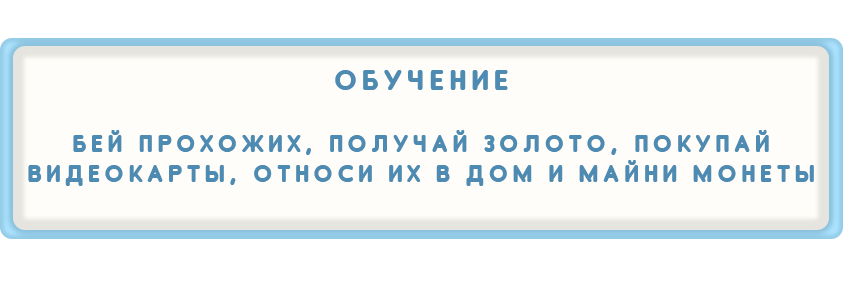
<style>
.page{position:relative;width:843px;height:307px;background:#fffdf9}
.page>*{position:absolute;margin:0}
.t1{font:30px "OvalCyr-Normal";letter-spacing:0.18em;color:#4d8bb3}
.t2{font:25px "OvalCyr-Normal";letter-spacing:0.18em;color:#4d8bb3}
</style>
<div class="page">
<p class="t1" style="left:335px;top:70px;width:173px;height:20px">ОБУЧЕНИЕ</p>
<p class="t2" style="left:28px;top:130px;width:786px;height:56px;text-align:center">БЕЙ ПРОХОЖИХ, ПОЛУЧАЙ ЗОЛОТО, ПОКУПАЙ ВИДЕОКАРТЫ, ОТНОСИ ИХ В ДОМ И МАЙНИ МОНЕТЫ</p>
</div>
